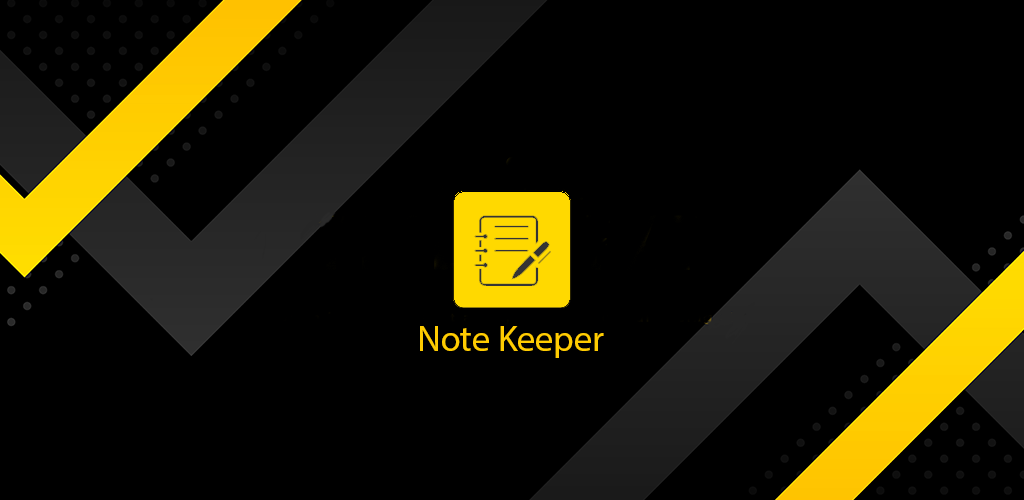
<style>
.page{position:relative;width:1024px;height:500px;background:#000000}
.page>*{position:absolute;margin:0}
.t1{font:36px "MyriadPro-Regular";color:#ffcc01}
</style>
<div class="page">
<p class="t1" style="left:420px;top:326px;width:184px;height:32px">Note Keeper</p>
</div>
